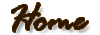
<style>
.page{position:relative;width:100px;height:35px;background:#ffffff}
.page>*{position:absolute;margin:0}
.t1{font:40px "RageItalic";color:#2f1601}
</style>
<div class="page">
<p class="t1" style="left:12px;top:3px;width:76px;height:29px">Home</p>
</div>
